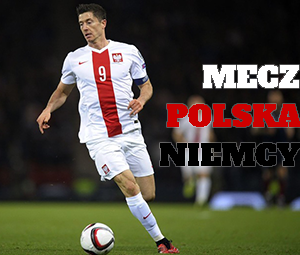
<style>
.page{position:relative;width:300px;height:255px}
.page>*{position:absolute;margin:0}
.t1{font:30px "AlfaSlabOne-Regular";color:#ffffff}
.t2{font:30px "AlfaSlabOne-Regular";color:#cd0000}
.t3{font:30px "AlfaSlabOne-Regular";color:#000000}
</style>
<div class="page">
<p class="t1" style="left:203px;top:65px;width:96px;height:23px">MECZ</p>
<p class="t2" style="left:167px;top:104px;width:134px;height:23px">POLSKA</p>
<p class="t3" style="left:160px;top:143px;width:140px;height:23px">NIEMCY</p>
</div>
